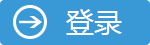
<style>
.page{position:relative;width:150px;height:45px;background:#3998d6}
.page>*{position:absolute;margin:0}
.t1{font:28px "MicrosoftYaHei";color:#ffffff}
</style>
<div class="page">
<p class="t1" style="left:66px;top:9px;width:56px;height:26px">登录</p>
</div>
